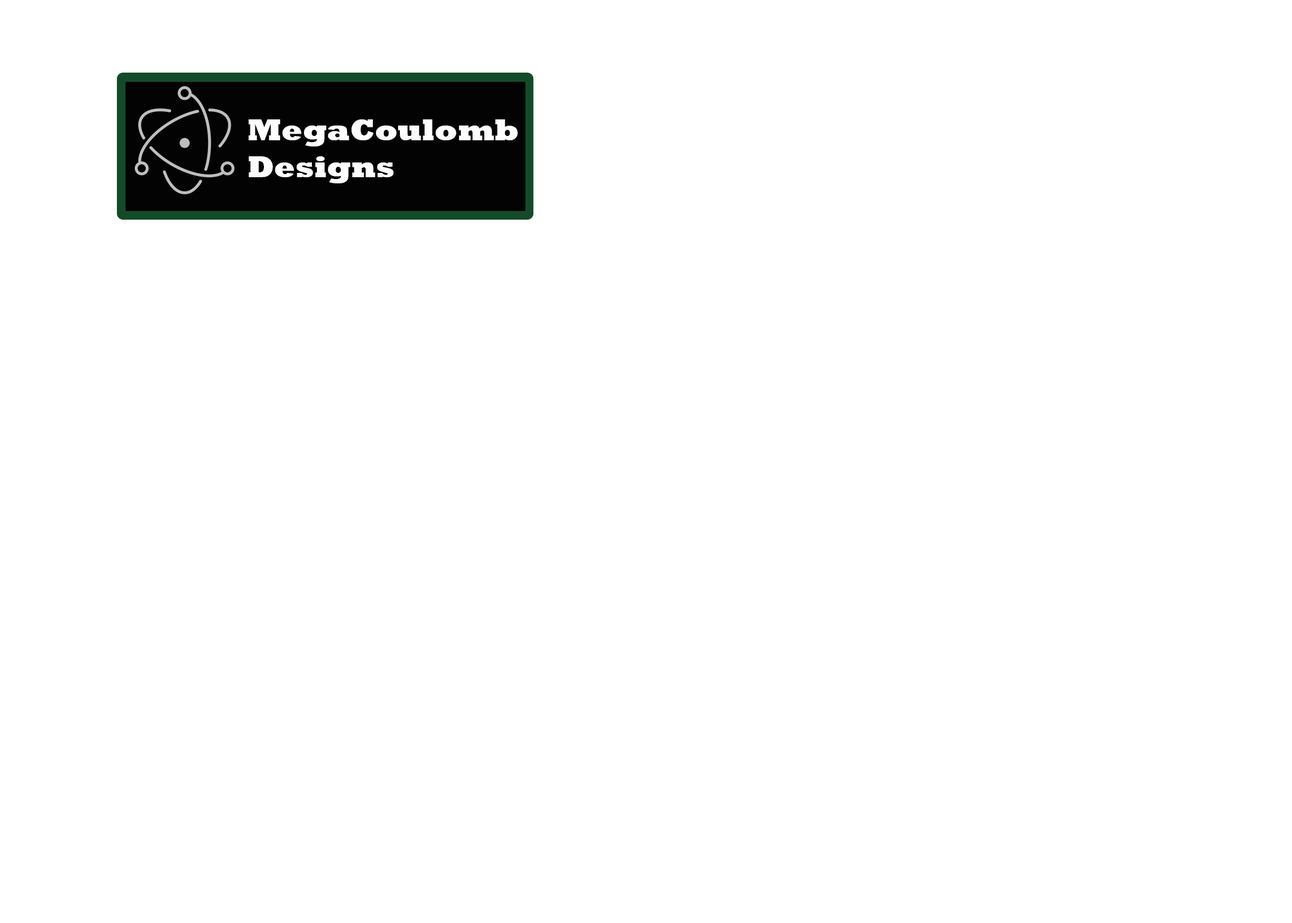
<style>
.page{position:relative;width:1292px;height:923px;background:#ffffff}
.page>*{position:absolute;margin:0}
.t1{font:30.8px "Rockwell-ExtraBold";color:#fdfdfd}
</style>
<div class="page">
<p class="t1" style="left:249px;top:119px;width:269px;height:64px">MegaCoulomb <br>Designs</p>
</div>
